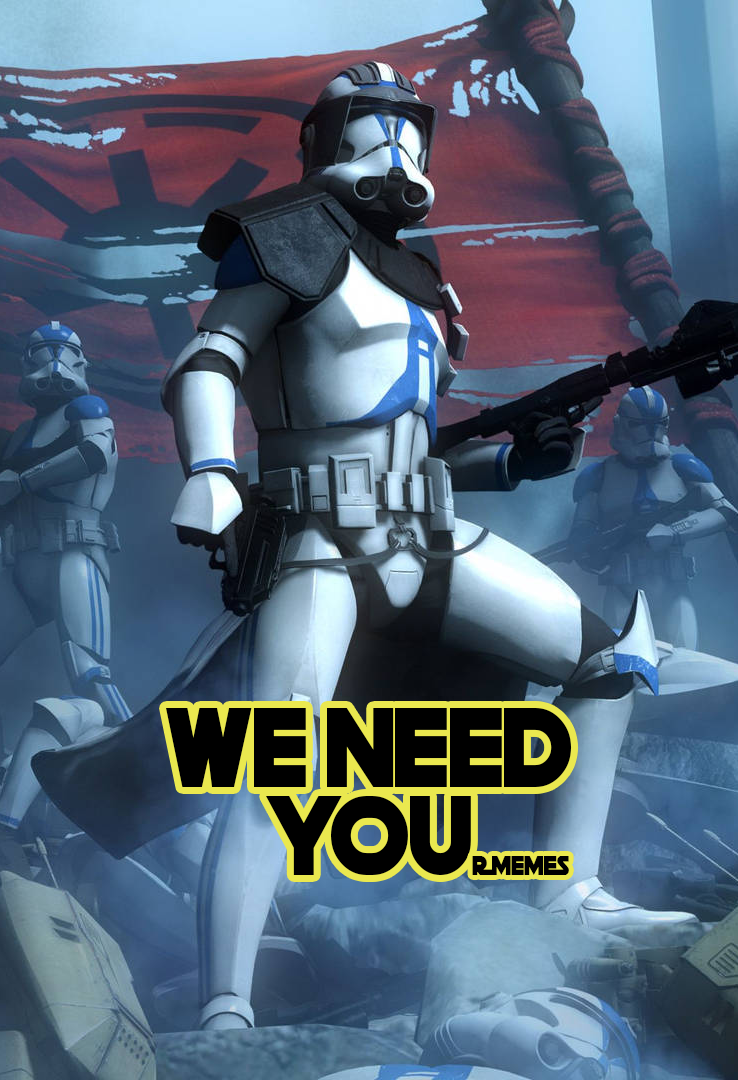
<style>
.page{position:relative;width:738px;height:1080px}
.page>*{position:absolute;margin:0}
.t1{font:112.4px/87.7px "DeathStar";color:#000000;text-transform:uppercase;scale:0.9 1}
.t2{font:27px "DeathStar";color:#000000;text-transform:uppercase;scale:0.9 1}
</style>
<div class="page">
<p class="t1" style="left:166px;top:708px;width:406px;height:167px;text-align:center">WE NEED<br>YOU</p>
<p class="t2" style="left:472px;top:856px;width:97px;height:19px">r memes</p>
</div>
